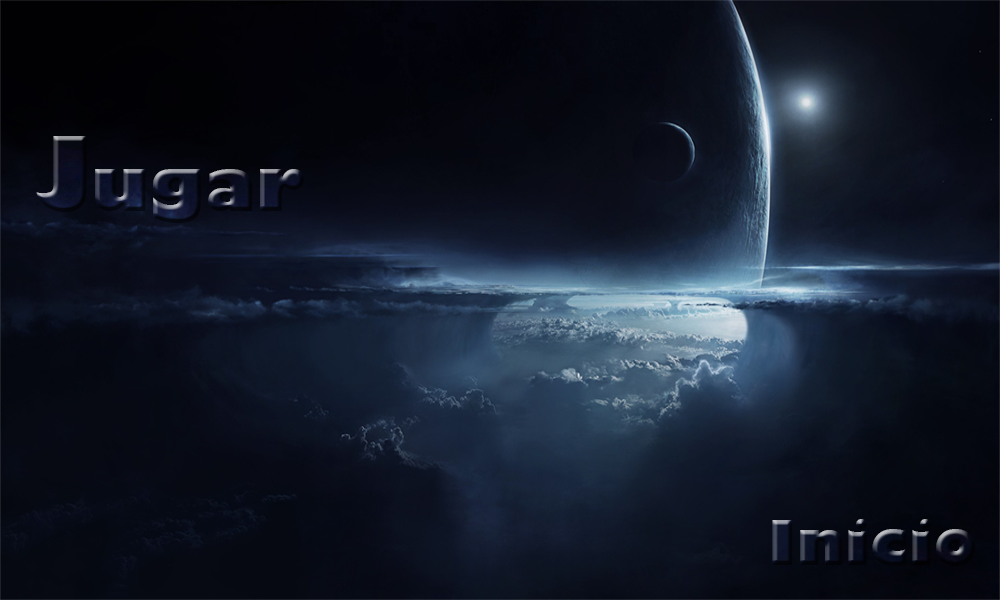
<style>
.page{position:relative;width:1000px;height:600px}
.page>*{position:absolute;margin:0}
.t1{font:72px "GillSans-UltraBold"}
.t2{font:100px "GillSans-UltraBold"}
.t3{font:60px "GillSans-UltraBold"}
</style>
<div class="page">
<p class="t1" style="left:36px;top:136px;width:268px;height:87px"><span class="t2">J</span>ugar</p>
<p class="t3" style="left:772px;top:519px;width:203px;height:47px">Inicio</p>
</div>
